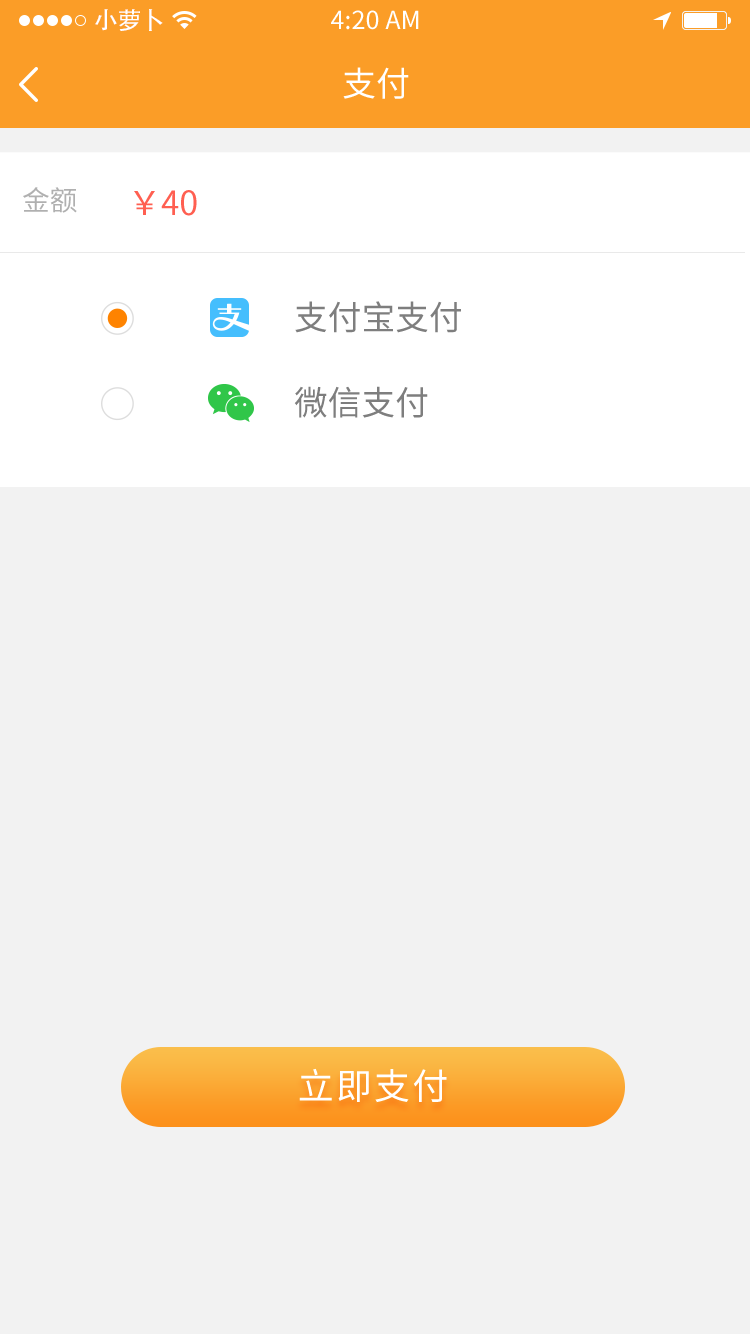
<style>
.page{position:relative;width:750px;height:1334px;background:#f2f2f2}
.page>*{position:absolute;margin:0}
.t1{font:24px "AdobeHeitiStd-Regular";color:#ffffff}
.t2{font:25px "SourceHanSansCN-Regular";color:#ffffff}
.t3{font:34px "SourceHanSansCN-Regular";color:#ffffff}
.t4{font:27.8px "SourceHanSansCN-Regular";color:#b0b0b0}
.t5{font:33.3px "SourceHanSansCN-Regular";color:#ff5f51}
.t6{font:33.8px "SourceHanSansCN-Regular";color:#7e7e7e}
.t7{font:36px "SourceHanSansCN-Regular";letter-spacing:0.06em;color:#ffffff}
</style>
<div class="page">
<p class="t1" style="left:95px;top:9px;width:68px;height:22px">小萝卜</p>
<p class="t2" style="left:331px;top:10px;width:88px;height:20px">4:20 AM</p>
<p class="t3" style="left:343px;top:67px;width:66px;height:32px">支付</p>
<p class="t4" style="left:23px;top:187px;width:54px;height:26px">金额</p>
<p class="t5" style="left:134px;top:190px;width:63px;height:26px">￥40</p>
<p class="t6" style="left:295px;top:301px;width:166px;height:32px">支付宝支付</p>
<p class="t6" style="left:294px;top:386px;width:134px;height:32px">微信支付</p>
<p class="t7" style="left:299px;top:1068px;width:148px;height:35px">立即支付</p>
</div>
